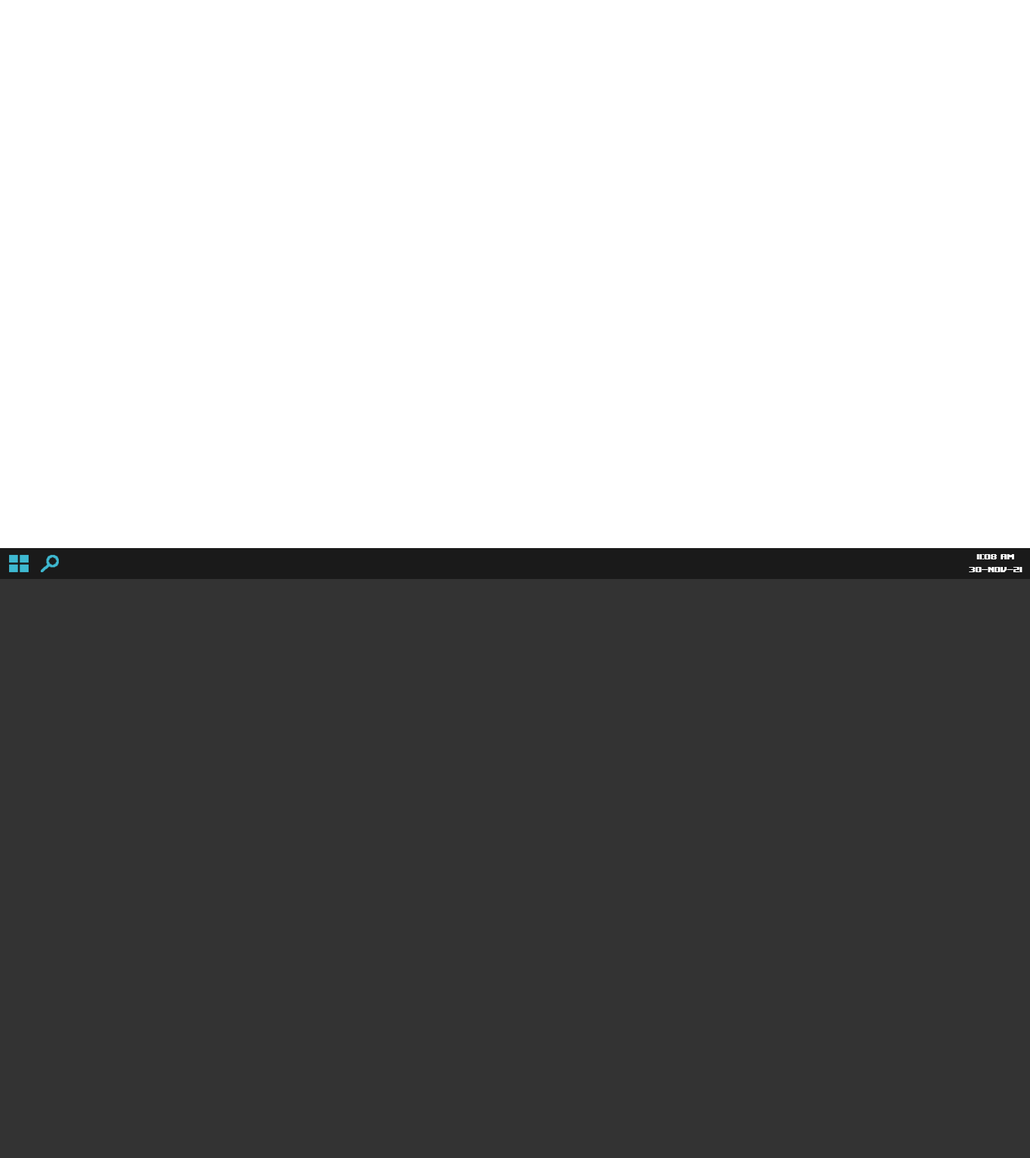
<style>
.page{position:relative;width:1030px;height:1158px;background:#333333}
.page>*{position:absolute;margin:0}
.t1{font:10.6px "UpheavalTT-BRK-";color:#ffffff}
</style>
<div class="page">
<p class="t1" style="left:969px;top:554px;width:53px;height:18px;text-align:center">11:08 am<br>30-nov-21</p>
</div>
